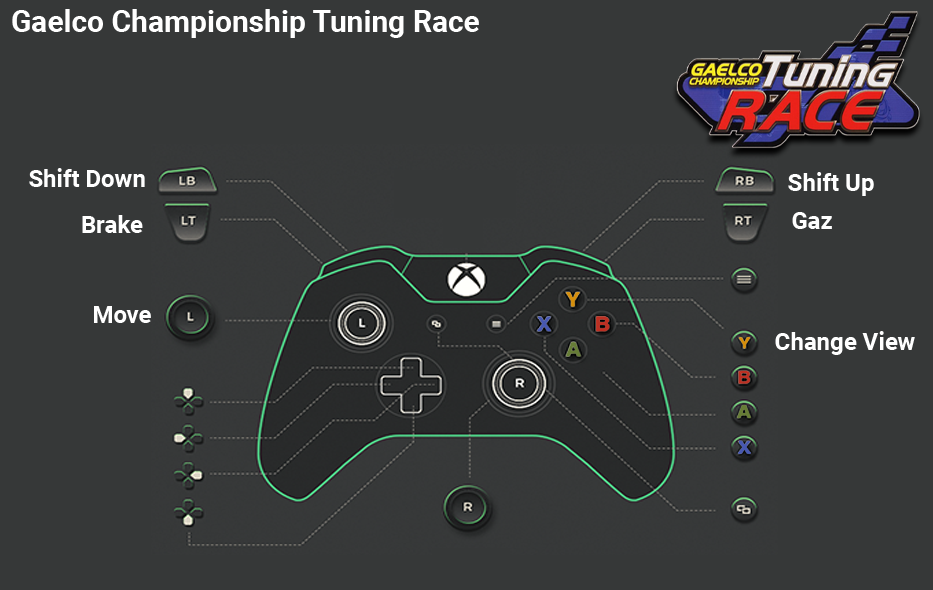
<style>
.page{position:relative;width:933px;height:590px;background:#363838}
.page>*{position:absolute;margin:0}
.t1{font:30px "Roboto-Bold";color:#ffffff}
.t2{font:24px "Roboto-Bold";color:#ffffff}
</style>
<div class="page">
<p class="t1" style="left:12px;top:9px;width:467px;height:29px">Gaelco Championship Tuning Race</p>
<p class="t2" style="left:29px;top:168px;width:116px;height:19px">Shift Down</p>
<p class="t2" style="left:788px;top:172px;width:86px;height:24px">Shift Up</p>
<p class="t2" style="left:82px;top:215px;width:61px;height:18px">Brake</p>
<p class="t2" style="left:792px;top:212px;width:40px;height:17px">Gaz</p>
<p class="t2" style="left:94px;top:306px;width:57px;height:17px">Move</p>
<p class="t2" style="left:775px;top:331px;width:140px;height:24px">Change View</p>
</div>
